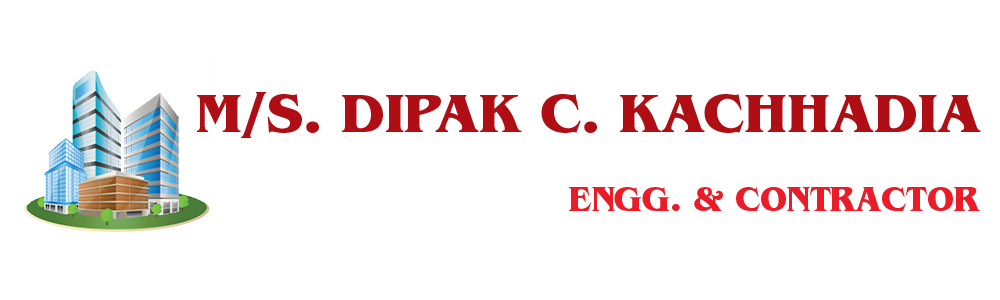
<style>
.page{position:relative;width:1000px;height:300px;background:#ffffff}
.page>*{position:absolute;margin:0}
.t1{font:56.4px "BenguiatStd-Bold";color:#af0e15;text-transform:uppercase}
.t2{font:34.5px "BenguiatStd-Bold";color:#e91c28;text-transform:uppercase}
</style>
<div class="page">
<p class="t1" style="left:197px;top:92px;width:784px;height:46px">M/s. dIpak c. kachhadia</p>
<p class="t2" style="left:569px;top:187px;width:411px;height:24px">engg. &amp; contractor</p>
</div>
